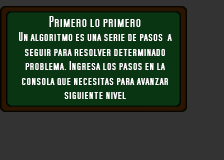
<style>
.page{position:relative;width:224px;height:160px;background:#333333}
.page>*{position:absolute;margin:0}
.t1{font:12.1px "SFMoviePoster";color:#ffffff;scale:1.08 1}
.t2{font:13.9px "SFMoviePoster";color:#ffffff;scale:1.08 1}
</style>
<div class="page">
<p class="t1" style="left:19px;top:16px;width:153px;height:83px;text-align:center"><span class="t2">Primero lo primero<br></span>Un algoritmo es una serie de pasos  a seguir para resolver determinado problema. Ingresa los pasos en la consola que necesitas para avanzar siguiente nivel</p>
</div>
